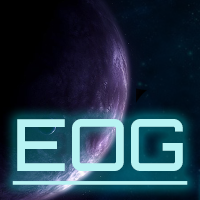
<style>
.page{position:relative;width:200px;height:200px}
.page>*{position:absolute;margin:0}
.t1{font:72px "Orbitron-Medium";color:#b8f3f4;text-decoration:underline}
</style>
<div class="page">
<p class="t1" style="left:12px;top:119px;width:176px;height:66px">EOG</p>
</div>
